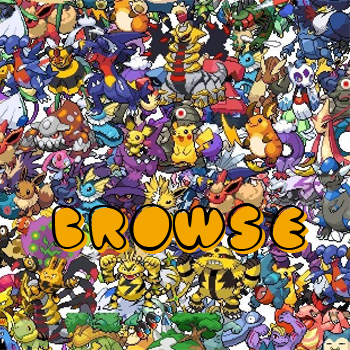
<style>
.page{position:relative;width:350px;height:350px}
.page>*{position:absolute;margin:0}
.t1{font:54px "Fatassoutline";color:#000000}
.t2{font:54px "Fatassfilled";color:#f3a600}
</style>
<div class="page">
<p class="t1" style="left:51px;top:203px;width:255px;height:48px">browse</p>
<p class="t2" style="left:54px;top:206px;width:255px;height:48px">browse</p>
</div>
